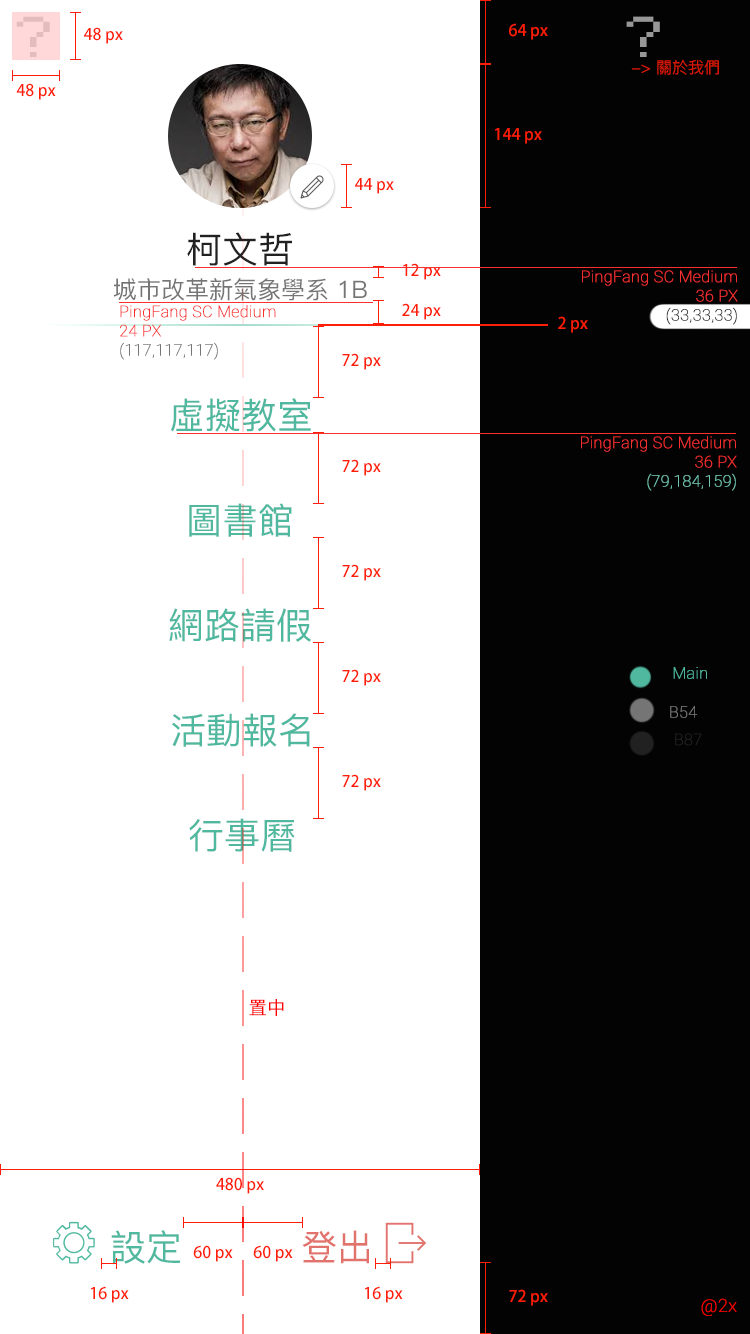
<style>
.page{position:relative;width:750px;height:1334px;background:#ffffff}
.page>*{position:absolute;margin:0}
.t1{font:53.6px "Small Fonts";color:#e3bdbd;scale:1.59 1}
.t2{font:53.6px "Small Fonts";color:#979797;scale:1.59 1}
.t3{font:16px "AdobeFanHeitiStd-Bold";color:#ff1e07}
.t4{font:16px "PingFang-SC-Regular";color:#e81b06}
.t5{font:36px "PingFang-SC-Medium";color:#212121}
.t6{font:16px "Roboto-Thin";color:#f83030;font-weight:bold}
.t7{font:16px "Roboto-Thin";color:#212121;font-weight:bold}
.t8{font:24px "PingFang-SC-Medium";color:#757575}
.t9{font:16px "Roboto-Thin";color:#757575;font-weight:bold}
.t10{font:36px "PingFang-SC-Medium";color:#4fb89f}
.t11{font:16px "Roboto-Thin";color:#71c4b0;font-weight:bold}
.t12{font:16px "Roboto-Thin";color:#4fb89f;font-weight:bold}
.t13{font:18px "PingFang-SC-Regular";color:#ff0000;font-weight:bold}
.t14{font:36px "PingFang-SC-Medium";color:#e2726c}
.t15{font:18px "Roboto-Thin";color:#ff0000;font-weight:bold}
</style>
<div class="page">
<p class="t1" style="left:16px;top:16px;width:34px;height:41px">?</p>
<p class="t2" style="left:626px;top:16px;width:34px;height:41px">?</p>
<p class="t3" style="left:84px;top:27px;width:39px;height:17px">48 px</p>
<p class="t3" style="left:509px;top:23px;width:39px;height:17px">64 px</p>
<p class="t4" style="left:631px;top:59px;width:88px;height:16px">-&gt; 關於我們</p>
<p class="t3" style="left:16px;top:83px;width:40px;height:17px">48 px</p>
<p class="t3" style="left:495px;top:128px;width:47px;height:16px">144 px</p>
<p class="t3" style="left:355px;top:178px;width:39px;height:16px">44 px</p>
<p class="t5" style="left:187px;top:232px;width:105px;height:34px">柯文哲</p>
<p class="t3" style="left:403px;top:263px;width:38px;height:17px">12 px</p>
<p class="t6" style="left:582px;top:270px;width:156px;height:55px;text-align:right">PingFang SC Medium<br>36 PX<br><span class="t7">(33,33,33)</span></p>
<p class="t8" style="left:113px;top:278px;width:254px;height:23px">城市改革新氣象學系 1B</p>
<p class="t6" style="left:120px;top:305px;width:156px;height:55px">PingFang SC Medium<br>24 PX<br><span class="t9">(117,117,117)</span></p>
<p class="t3" style="left:402px;top:303px;width:39px;height:17px">24 px</p>
<p class="t3" style="left:558px;top:316px;width:30px;height:17px">2 px</p>
<p class="t3" style="left:342px;top:353px;width:39px;height:17px">72 px</p>
<p class="t10" style="left:171px;top:398px;width:140px;height:34px">虛擬教室</p>
<p class="t6" style="left:581px;top:436px;width:156px;height:55px;text-align:right">PingFang SC Medium<br>36 PX<br><span class="t11">(79,184,159)</span></p>
<p class="t3" style="left:342px;top:459px;width:39px;height:17px">72 px</p>
<p class="t10" style="left:189px;top:503px;width:103px;height:34px">圖書館</p>
<p class="t3" style="left:342px;top:564px;width:39px;height:17px">72 px</p>
<p class="t10" style="left:169px;top:608px;width:142px;height:34px">網路請假</p>
<p class="t3" style="left:342px;top:669px;width:39px;height:17px">72 px</p>
<p class="t12" style="left:673px;top:667px;width:34px;height:12px">Main</p>
<p class="t10" style="left:172px;top:713px;width:138px;height:34px">活動報名</p>
<p class="t9" style="left:670px;top:706px;width:27px;height:12px">B54</p>
<p class="t7" style="left:675px;top:733px;width:27px;height:13px">B87</p>
<p class="t3" style="left:342px;top:774px;width:39px;height:17px">72 px</p>
<p class="t10" style="left:189px;top:818px;width:106px;height:34px">行事曆</p>
<p class="t13" style="left:249px;top:999px;width:35px;height:17px">置中</p>
<p class="t3" style="left:216px;top:1177px;width:48px;height:17px">480 px</p>
<p class="t10" style="left:111px;top:1230px;width:70px;height:34px">設定</p>
<p class="t14" style="left:302px;top:1230px;width:67px;height:34px">登出</p>
<p class="t3" style="left:193px;top:1245px;width:40px;height:17px">60 px</p>
<p class="t3" style="left:253px;top:1245px;width:40px;height:17px">60 px</p>
<p class="t3" style="left:90px;top:1286px;width:39px;height:17px">16 px</p>
<p class="t3" style="left:364px;top:1286px;width:39px;height:17px">16 px</p>
<p class="t3" style="left:509px;top:1289px;width:39px;height:17px">72 px</p>
<p class="t15" style="left:701px;top:1298px;width:36px;height:18px">@2x</p>
</div>
